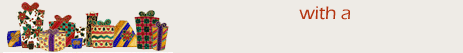
<style>
.page{position:relative;width:463px;height:53px;background:#eeebe6}
.page>*{position:absolute;margin:0}
.t1{font:18.7px "ErasITC-Medium";color:#b4330f}
</style>
<div class="page">
<p class="t1" style="left:299px;top:6px;width:51px;height:14px">with a</p>
</div>
